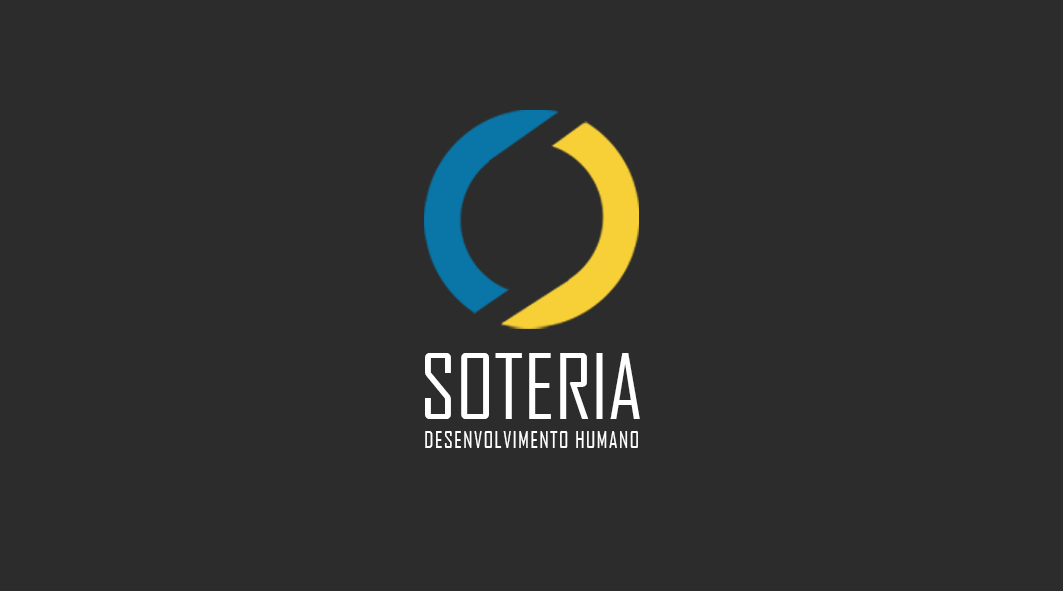
<style>
.page{position:relative;width:1063px;height:591px;background:#2c2c2c}
.page>*{position:absolute;margin:0}
.t1{font:85.8px "AgencyFB-Reg";color:#ffffff;text-transform:uppercase}
.t2{font:22.1px "AgencyFB-Reg";letter-spacing:0.05em;color:#ffffff;text-transform:uppercase}
</style>
<div class="page">
<p class="t1" style="left:425px;top:353px;width:215px;height:66px">Soteria</p>
<p class="t2" style="left:425px;top:431px;width:213px;height:17px">Desenvolvimento Humano</p>
</div>
